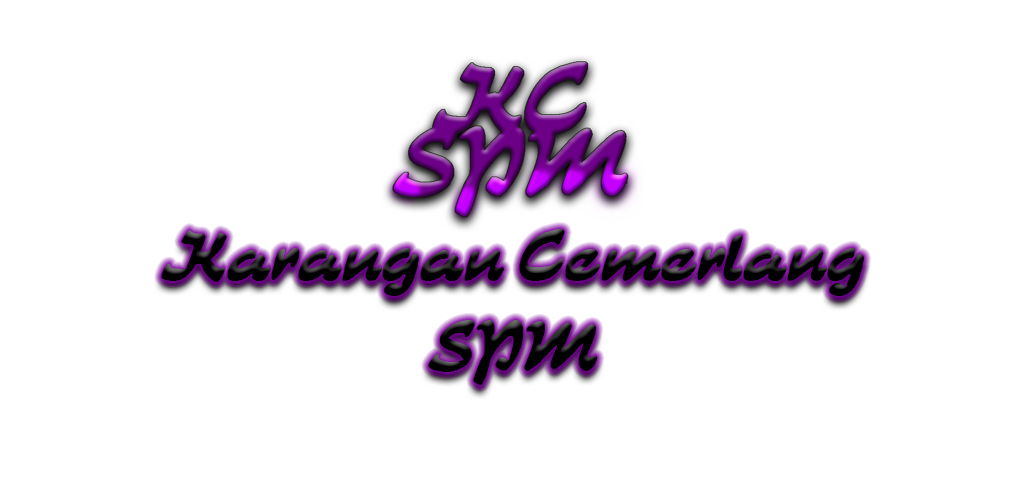
<style>
.page{position:relative;width:1024px;height:500px;background:#ffffff}
.page>*{position:absolute;margin:0}
.t1{font:75px "CATKurier";color:#000000}
</style>
<div class="page">
<p class="t1" style="left:161px;top:229px;width:703px;height:156px;text-align:center">Karangan Cemerlang<br>SPM</p>
</div>
